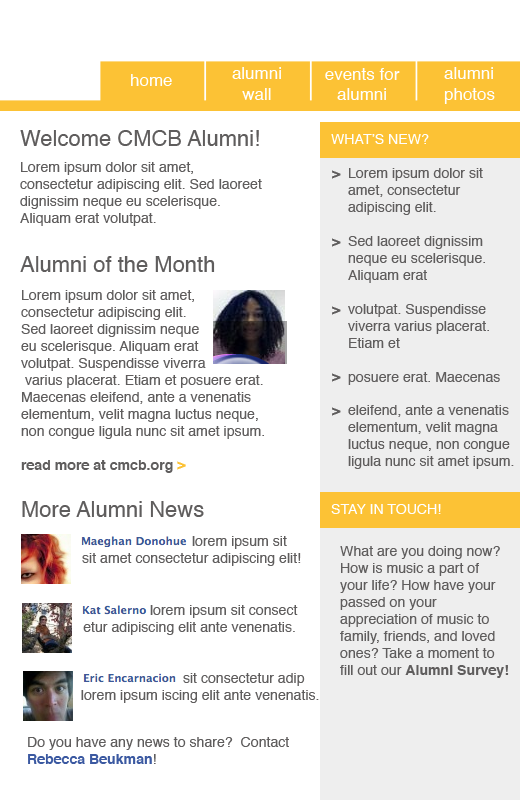
<style>
.page{position:relative;width:520px;height:800px;background:#ffffff}
.page>*{position:absolute;margin:0}
.t1{font:17px "Helvetica";color:#ffffff}
.t2{font:22px "Helvetica";color:#5f5d5d}
.t3{font:14.1px "Helvetica";color:#ffffff}
.t4{font:14.1px "Helvetica";color:#5f5d5d}
.t5{font:14.1px "Helvetica-Bold";color:#5f5d5d}
.t6{font:14.1px "Helvetica-Bold";color:#fcc235}
.t7{font:14.1px "Helvetica-Bold";color:#3b59a1}
</style>
<div class="page">
<p class="t1" style="left:131px;top:74px;width:41px;height:12px">home</p>
<p class="t1" style="left:232px;top:67px;width:49px;height:33px;text-align:center">alumni<br>wall</p>
<p class="t1" style="left:325px;top:68px;width:75px;height:32px;text-align:center">events for<br>alumni</p>
<p class="t1" style="left:444px;top:67px;width:51px;height:37px">alumni<br>photos</p>
<p class="t2" style="left:20px;top:130px;width:239px;height:16px">Welcome CMCB Alumni!</p>
<p class="t3" style="left:331px;top:134px;width:98px;height:10px">WHAT’S NEW?</p>
<p class="t4" style="left:20px;top:162px;width:242px;height:64px">Lorem ipsum dolor sit amet, consectetur adipiscing elit. Sed laoreet dignissim neque eu scelerisque. Aliquam erat volutpat.</p>
<p class="t5" style="left:332px;top:170px;width:9px;height:246px">&gt;<br><br><br><br>&gt;<br><br><br><br>&gt;<br><br><br><br>&gt;<br><br>&gt;</p>
<p class="t4" style="left:348px;top:168px;width:166px;height:301px">Lorem ipsum dolor sit amet, consectetur adipiscing elit. <br><br>Sed laoreet dignissim neque eu scelerisque. Aliquam erat <br><br>volutpat. Suspendisse viverra varius placerat. Etiam et <br><br>posuere erat. Maecenas <br><br>eleifend, ante a venenatis elementum, velit magna luctus neque, non congue ligula nunc sit amet ipsum.</p>
<p class="t2" style="left:20px;top:256px;width:195px;height:16px">Alumni of the Month</p>
<p class="t4" style="left:21px;top:290px;width:243px;height:183px">Lorem ipsum dolor sit amet, consectetur adipiscing elit. <br>Sed laoreet dignissim neque <br>eu scelerisque. Aliquam erat <br>volutpat. Suspendisse viverra<br> varius placerat. Etiam et posuere erat. Maecenas eleifend, ante a venenatis elementum, velit magna luctus neque, non congue ligula nunc sit amet ipsum. <br><br><span class="t5">read more at cmcb.org </span><span class="t6">&gt;</span></p>
<p class="t2" style="left:22px;top:501px;width:182px;height:16px">More Alumni News</p>
<p class="t3" style="left:331px;top:504px;width:110px;height:10px">STAY IN TOUCH!</p>
<p class="t4" style="left:82px;top:536px;width:219px;height:30px">lorem ipsum sit<br>sit amet consectetur adipiscing elit!</p>
<p class="t4" style="left:340px;top:546px;width:169px;height:132px">What are you doing now? How is music a part of your life? How have your passed on your appreciation of music to family, friends, and loved ones? Take a moment to fill out our <span class="t5">Alumni Survey!</span></p>
<p class="t4" style="left:83px;top:605px;width:215px;height:30px">lorem ipsum sit consect<br>           etur adipiscing elit ante venenatis.</p>
<p class="t4" style="left:81px;top:673px;width:238px;height:30px">sit consectetur adip<br>  lorem ipsum iscing elit ante venenatis.</p>
<p class="t4" style="left:28px;top:737px;width:261px;height:27px">Do you have any news to share?  Contact<br><span class="t7">Rebecca Beukman</span>!</p>
</div>
